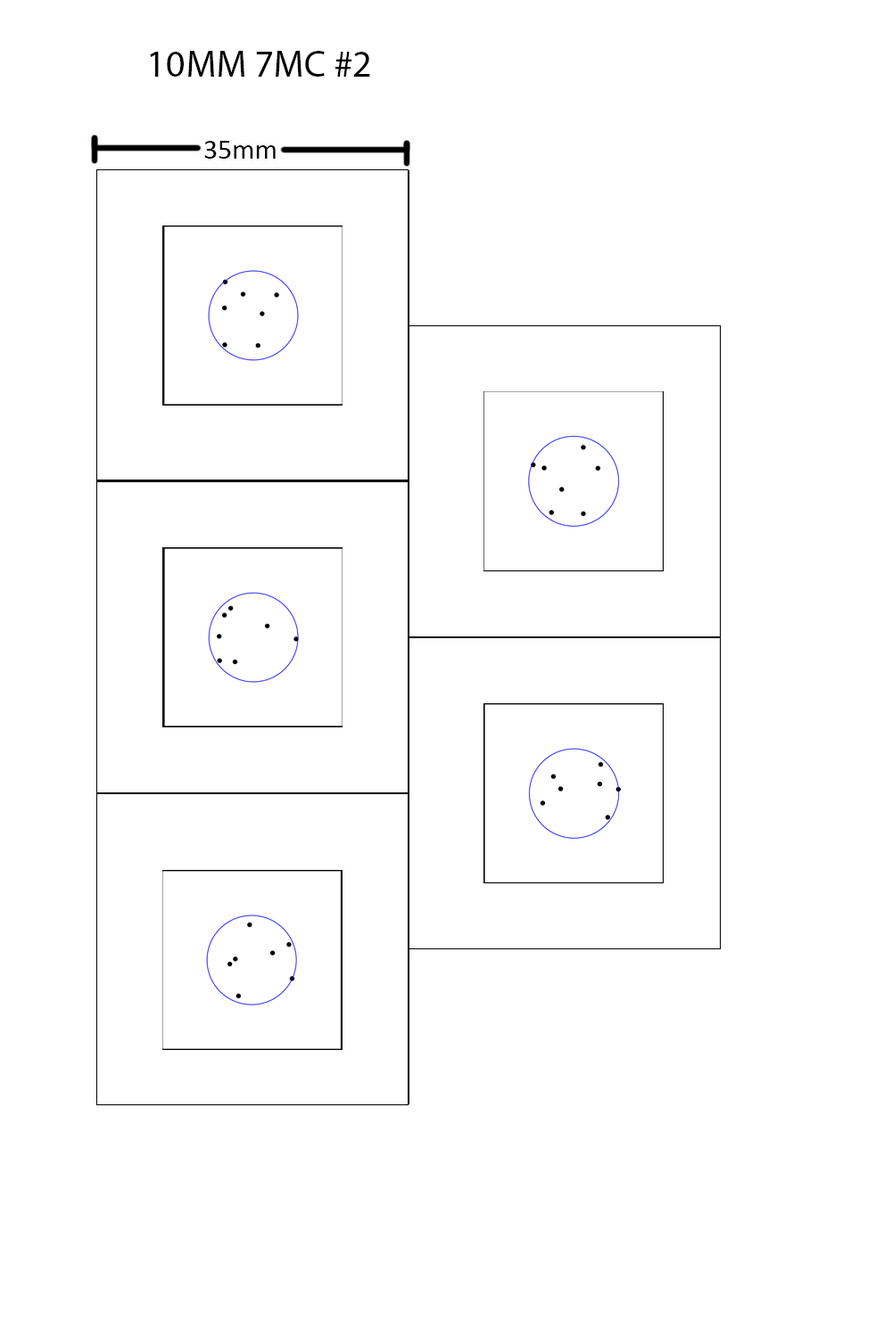
<style>
.page{position:relative;width:892px;height:1337px;background:#ffffff}
.page>*{position:absolute;margin:0}
.t1{font:37.7px "MyriadPro-Regular";color:#000000}
</style>
<div class="page">
<p class="t1" style="left:150px;top:51px;width:220px;height:26px">10MM 7MC #2</p>
</div>
